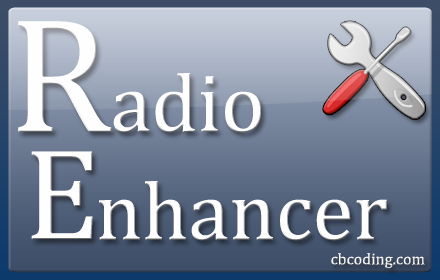
<style>
.page{position:relative;width:440px;height:280px}
.page>*{position:absolute;margin:0}
.t1{font:165.1px "Cambria";color:#fefefe}
.t2{font:83.5px "Cambria";color:#fefefe}
.t3{font:131.2px "Cambria";color:#fefefe}
.t4{font:16.1px "Cambria";color:#fefefe}
</style>
<div class="page">
<p class="t1" style="left:18px;top:21px;width:94px;height:111px">R</p>
<p class="t2" style="left:113px;top:73px;width:148px;height:60px">adio</p>
<p class="t3" style="left:31px;top:151px;width:62px;height:88px">E</p>
<p class="t2" style="left:99px;top:181px;width:288px;height:60px">nhancer</p>
<p class="t4" style="left:331px;top:253px;width:94px;height:16px">cbcoding.com</p>
</div>
